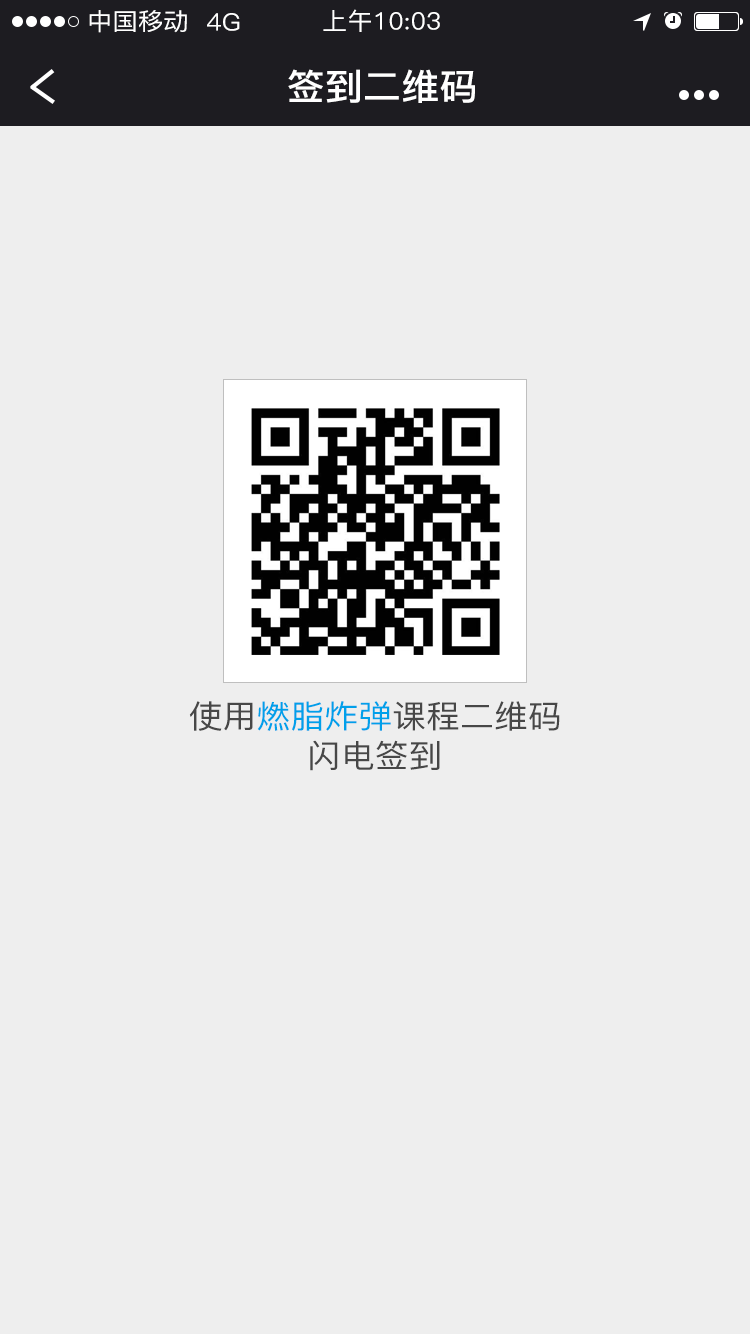
<style>
.page{position:relative;width:750px;height:1334px;background:#eeeeee}
.page>*{position:absolute;margin:0}
.t1{font:24px "PingFang-SC-Medium";letter-spacing:0.01em;color:#ffffff;scale:1.05 1}
.t2{font:36px "PingFang-SC-Bold";letter-spacing:0.01em;color:#ffffff;scale:1.05 1}
.t3{font:32px "PingFang-SC-Medium";letter-spacing:0.01em;color:#474747;scale:1.05 1}
.t4{font:32px "PingFang-SC-Medium";letter-spacing:0.01em;color:#00a0ea;scale:1.05 1}
</style>
<div class="page">
<p class="t1" style="left:89px;top:10px;width:98px;height:23px">中国移动</p>
<p class="t1" style="left:207px;top:13px;width:33px;height:18px">4G</p>
<p class="t1" style="left:323px;top:9px;width:117px;height:23px">上午10:03</p>
<p class="t2" style="left:288px;top:69px;width:187px;height:34px">签到二维码</p>
<p class="t3" style="left:189px;top:701px;width:371px;height:30px">使用<span class="t4">燃脂炸弹</span>课程二维码</p>
<p class="t3" style="left:310px;top:740px;width:130px;height:31px">闪电签到</p>
</div>
